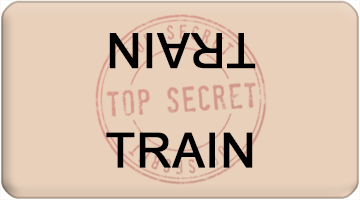
<style>
.page{position:relative;width:360px;height:200px;background:#e8d0bb}
.page>*{position:absolute;margin:0}
.t1{font:48px "ArialMT";color:#000000;font-weight:bold}
</style>
<div class="page">
<p class="t1" style="left:109px;top:33px;width:147px;height:36px;rotate:180deg">TRAIN</p>
<p class="t1" style="left:106px;top:132px;width:147px;height:36px">TRAIN</p>
</div>
